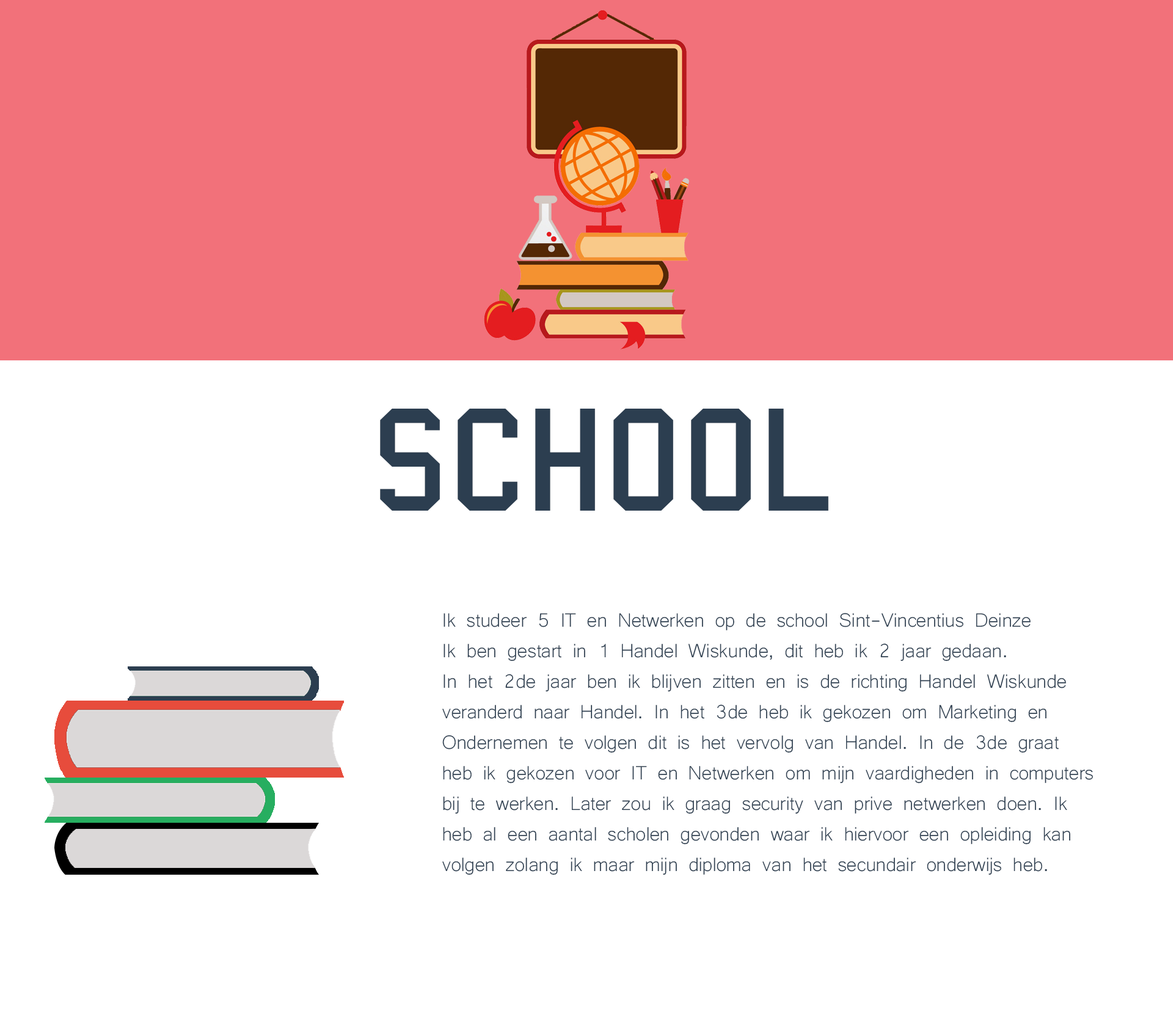
<style>
.page{position:relative;width:1173px;height:1017px;background:#ffffff}
.page>*{position:absolute;margin:0}
.t1{font:149.6px "College";letter-spacing:0.02em;color:#2c3e50}
.t2{font:24.9px "Microsoft-Yi-Baiti";letter-spacing:-0.02em;color:#2c3e50}
</style>
<div class="page">
<p class="t1" style="left:380px;top:409px;width:448px;height:102px">School</p>
<p class="t2" style="left:442px;top:613px;width:651px;height:262px">Ik studeer 5 IT en Netwerken op de school Sint-Vincentius Deinze<br>Ik ben gestart in 1 Handel Wiskunde, dit heb ik 2 jaar gedaan.<br>In het 2de jaar ben ik blijven zitten en is de richting Handel Wiskunde<br>veranderd naar Handel. In het 3de heb ik gekozen om Marketing en<br>Ondernemen te volgen dit is het vervolg van Handel. In de 3de graat<br>heb ik gekozen voor IT en Netwerken om mijn vaardigheden in computers<br>bij te werken. Later zou ik graag security van prive netwerken doen. Ik<br>heb al een aantal scholen gevonden waar ik hiervoor een opleiding kan <br>volgen zolang ik maar mijn diploma van het secundair onderwijs heb.</p>
</div>
